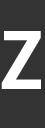
<style>
.page{position:relative;width:45px;height:128px;background:#333333}
.page>*{position:absolute;margin:0}
.t1{font:75px "AdobeGothicStd-Bold";color:#ffffff}
</style>
<div class="page">
<p class="t1" style="left:1px;top:31px;width:40px;height:58px">Z</p>
</div>
